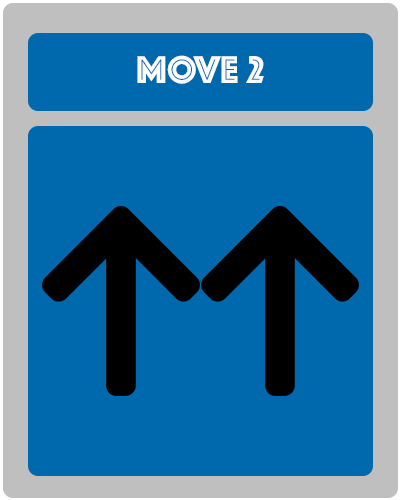
<style>
.page{position:relative;width:400px;height:500px;background:#0069ae}
.page>*{position:absolute;margin:0}
.t1{font:40px "Phosphate-Inline";color:#fefefe}
</style>
<div class="page">
<p class="t1" style="left:137px;top:55px;width:127px;height:29px">MOVE 2</p>
</div>
